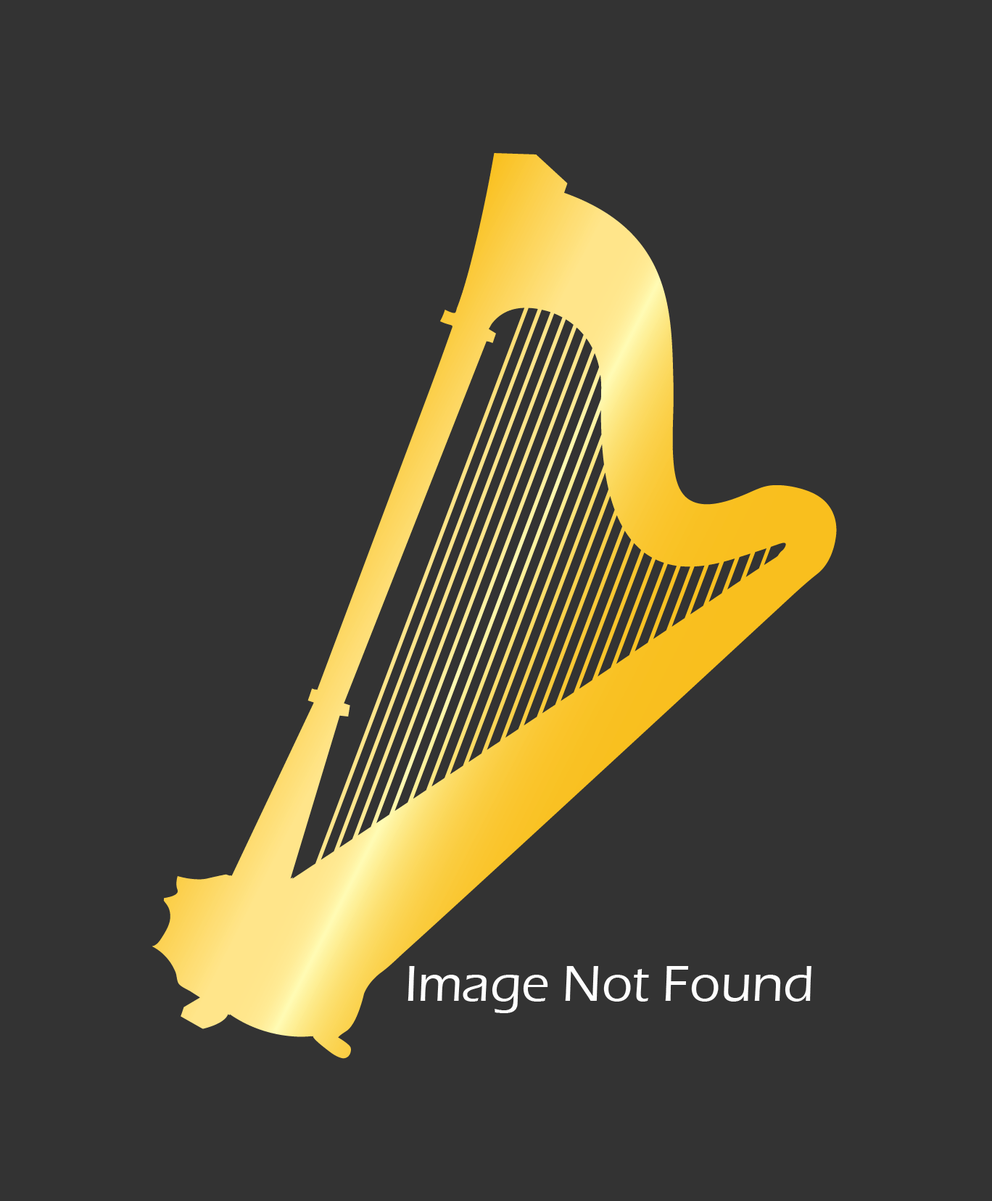
<style>
.page{position:relative;width:992px;height:1201px;background:#333333}
.page>*{position:absolute;margin:0}
.t1{font:52.2px "ErasITC-Medium";color:#fefefe}
</style>
<div class="page">
<p class="t1" style="left:408px;top:966px;width:404px;height:48px">Image Not Found</p>
</div>
